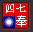
<style>
.page{position:relative;width:33px;height:32px;background:#f20000}
.page>*{position:absolute;margin:0}
.t1{font:10.4px "SimSun";color:#ffffff}
.t2{font:11.7px "SimSun";color:#ffffff}
</style>
<div class="page">
<p class="t1" style="left:6px;top:4px;width:20px;height:9px">四七</p>
<p class="t2" style="left:16px;top:15px;width:11px;height:12px">奉</p>
</div>
